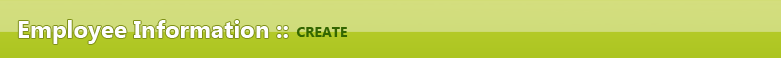
<style>
.page{position:relative;width:781px;height:58px}
.page>*{position:absolute;margin:0}
.t1{font:24px "SegoeUI-Bold";color:#fefefe}
.t2{font:14px "SegoeUI-Bold";color:#336600}
</style>
<div class="page">
<p class="t1" style="left:18px;top:20px;width:270px;height:24px">Employee Information ::</p>
<p class="t2" style="left:296px;top:27px;width:52px;height:10px">CREATE</p>
</div>
